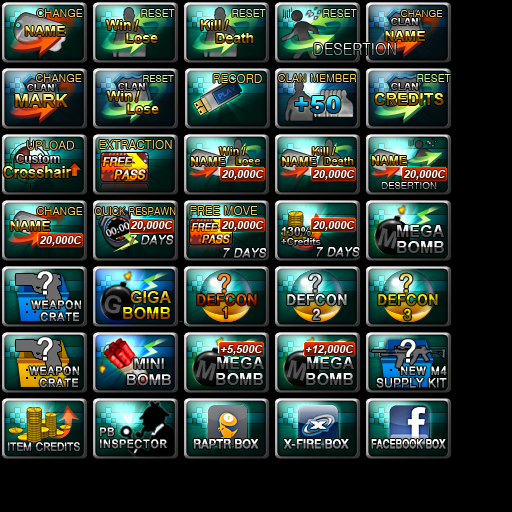
<style>
.page{position:relative;width:512px;height:512px;background:#000000}
.page>*{position:absolute;margin:0}
.t1{font:11px "Gulim";color:#ffcc66}
.t2{font:11px "Gulim";color:#ccff99}
.t3{font:10px "Gulim";color:#ffcc66}
.t4{font:14px "Arial-BoldMT"}
.t5{font:17.1px "Gulim";scale:0.88 1}
.t6{font:10px "Gulim";color:#ccff99}
.t7{font:12px "Gulim";color:#ffcc66}
.t8{font:18px "Arial-BoldMT"}
.t9{font:24px "Arial-Black"}
.t10{font:16px "Arial-BoldMT"}
.t11{font:12px "Gulim";color:#ffcc66;text-transform:uppercase}
.t12{font:11px/10px "Arial-BoldMT"}
.t13{font:12px "Arial-BoldMT"}
.t14{font:11.5px/13px "YDGothic540";font-weight:bold;font-style:italic}
.t15{font:10.5px/11.5px "YDGothic540";font-weight:bold;font-style:italic}
.t16{font:12px/13px "YDGothic540";font-weight:bold;font-style:italic}
.t17{font:17.2px "Arial-BoldMT";scale:0.85 1}
.t18{font:11px "Arial-BoldMT";color:#ffffff;font-style:italic}
.t19{font:10px "Gulim"}
.t20{font:11px "Gulim";color:#ffcc66;text-transform:uppercase;scale:0.9 1}
.t21{font:10.3px/11.7px "YDGothic540";font-weight:bold;font-style:italic}
.t22{font:9.5px/10.3px "YDGothic540";font-weight:bold;font-style:italic}
.t23{font:10.8px/11.7px "YDGothic540";font-weight:bold;font-style:italic}
.t24{font:16px/16px "Arial-BoldMT"}
.t25{font:12px "Gulim";font-weight:bold;font-style:italic}
.t26{font:10px "Arial-BoldMT"}
.t27{font:31.2px "ArialUnicodeMS";color:#ffffff;font-weight:bold}
.t28{font:25px "ArialUnicodeMS";color:#ff871c;font-weight:bold}
.t29{font:25px "ArialUnicodeMS";font-weight:bold}
.t30{font:15px "YDIYGO240";font-weight:bold;scale:0.91 1}
.t31{font:12px "YDIYGO240";font-weight:bold;scale:0.91 1}
.t32{font:24px "Arial-BoldMT";color:#505152}
.t33{font:15px/16px "Arial-BoldMT"}
.t34{font:12px "Dotum";font-weight:bold}
.t35{font:12px "YDIYGO240-KSCpc-EUC-H";letter-spacing:-0.15em;scale:0.9 1}
.t36{font:12px "HelveticaNeueLT-Medium";font-weight:bold;scale:0.91 1}
.t37{font:13.2px "HelveticaNeueLT-Medium";font-weight:bold;scale:0.68 1}
</style>
<div class="page">
<p class="t1" style="left:37px;top:9px;width:46px;height:8px">CHANGE</p>
<p class="t2" style="left:141px;top:9px;width:34px;height:8px">RESET</p>
<p class="t2" style="left:232px;top:9px;width:34px;height:8px">RESET</p>
<p class="t2" style="left:323px;top:9px;width:34px;height:8px">RESET</p>
<p class="t3" style="left:401px;top:10px;width:42px;height:7px">CHANGE</p>
<p class="t4" style="left:25px;top:26px;width:40px;height:10px">NAME</p>
<p class="t4" style="left:385px;top:31px;width:40px;height:10px">NAME</p>
<p class="t5" style="left:314px;top:43px;width:82px;height:12px">DESERTION</p>
<p class="t1" style="left:36px;top:74px;width:46px;height:8px">CHANGE</p>
<p class="t6" style="left:143px;top:75px;width:31px;height:7px">RESET</p>
<p class="t7" style="left:213px;top:74px;width:49px;height:9px">RECORD</p>
<p class="t1" style="left:278px;top:74px;width:79px;height:8px">CLAN MEMBER</p>
<p class="t2" style="left:417px;top:74px;width:34px;height:8px">RESET</p>
<p class="t8" style="left:15px;top:94px;width:53px;height:13px">MARK</p>
<p class="t9" style="left:295px;top:96px;width:46px;height:17px">+50</p>
<p class="t10" style="left:374px;top:93px;width:70px;height:12px">CREDITS</p>
<p class="t7" style="left:27px;top:140px;width:47px;height:10px">UPLOAD</p>
<p class="t11" style="left:99px;top:140px;width:73px;height:9px">Extraction</p>
<p class="t12" style="left:219px;top:147px;width:42px;height:18px;text-align:center">Win / <br>         Lose</p>
<p class="t12" style="left:312px;top:147px;width:42px;height:18px;text-align:center">Kill / <br>         Death</p>
<p class="t13" style="left:16px;top:154px;width:44px;height:9px">Custom</p>
<p class="t14" style="left:102px;top:157px;width:44px;height:23px"><span class="t15"> </span>FREE <br>    <span class="t16">PASS</span></p>
<p class="t13" style="left:190px;top:157px;width:36px;height:9px">NAME</p>
<p class="t13" style="left:281px;top:157px;width:36px;height:9px">NAME</p>
<p class="t13" style="left:371px;top:156px;width:36px;height:9px">NAME</p>
<p class="t17" style="left:3px;top:166px;width:69px;height:12px">Crosshair</p>
<p class="t18" style="left:221px;top:170px;width:43px;height:10px">20,000C</p>
<p class="t18" style="left:312px;top:170px;width:43px;height:10px">20,000C</p>
<p class="t18" style="left:403px;top:170px;width:43px;height:10px">20,000C</p>
<p class="t19" style="left:381px;top:182px;width:56px;height:7px">DESERTION</p>
<p class="t1" style="left:37px;top:207px;width:46px;height:8px">CHANGE</p>
<p class="t20" style="left:95px;top:207px;width:81px;height:8px">Quick Respawn</p>
<p class="t7" style="left:190px;top:206px;width:68px;height:9px">FREE MOVE</p>
<p class="t4" style="left:10px;top:221px;width:40px;height:10px">NAME</p>
<p class="t18" style="left:130px;top:221px;width:43px;height:10px">20,000C</p>
<p class="t21" style="left:191px;top:222px;width:39px;height:22px"><span class="t22"> </span>FREE <br>    <span class="t23">PASS</span></p>
<p class="t18" style="left:221px;top:221px;width:43px;height:10px">20,000C</p>
<p class="t18" style="left:312px;top:221px;width:43px;height:10px">20,000C</p>
<p class="t13" style="left:281px;top:227px;width:30px;height:9px">130%</p>
<p class="t24" style="left:397px;top:225px;width:47px;height:28px">MEGA<br>BOMB</p>
<p class="t18" style="left:39px;top:236px;width:43px;height:10px">20,000C</p>
<p class="t25" style="left:130px;top:235px;width:44px;height:10px">7 DAYS</p>
<p class="t26" style="left:281px;top:238px;width:40px;height:7px">+Credits</p>
<p class="t25" style="left:223px;top:248px;width:44px;height:10px">7 DAYS</p>
<p class="t25" style="left:316px;top:247px;width:44px;height:10px">7 DAYS</p>
<p class="t27" style="left:37px;top:271px;width:16px;height:24px">?</p>
<p class="t28" style="left:218px;top:273px;width:13px;height:20px">?</p>
<p class="t29" style="left:400px;top:273px;width:13px;height:20px">?</p>
<p class="t24" style="left:123px;top:291px;width:48px;height:28px;text-align:right">GIGA<br>BOMB</p>
<p class="t30" style="left:197px;top:293px;width:60px;height:13px">DEFCON</p>
<p class="t30" style="left:287px;top:293px;width:60px;height:13px">DEFCON</p>
<p class="t30" style="left:378px;top:293px;width:60px;height:13px">DEFCON</p>
<p class="t31" style="left:31px;top:300px;width:51px;height:10px">WEAPON</p>
<p class="t32" style="left:104px;top:295px;width:18px;height:19px;rotate:15deg">G</p>
<p class="t31" style="left:40px;top:312px;width:40px;height:10px">CRATE</p>
<p class="t30" style="left:222px;top:306px;width:6px;height:13px">1</p>
<p class="t30" style="left:312px;top:308px;width:8px;height:13px">2</p>
<p class="t30" style="left:403px;top:308px;width:9px;height:13px">3</p>
<p class="t27" style="left:37px;top:337px;width:16px;height:24px">?</p>
<p class="t27" style="left:400px;top:339px;width:16px;height:24px">?</p>
<p class="t18" style="left:221px;top:345px;width:42px;height:10px">+5,500C</p>
<p class="t18" style="left:306px;top:345px;width:48px;height:10px">+12,000C</p>
<p class="t31" style="left:29px;top:366px;width:51px;height:10px">WEAPON</p>
<p class="t33" style="left:127px;top:358px;width:44px;height:28px;text-align:center">MINI<br>BOMB</p>
<p class="t24" style="left:216px;top:357px;width:48px;height:28px;text-align:right">MEGA<br>BOMB</p>
<p class="t24" style="left:306px;top:357px;width:48px;height:28px;text-align:right">MEGA<br>BOMB</p>
<p class="t31" style="left:400px;top:366px;width:47px;height:10px">NEW M4</p>
<p class="t31" style="left:39px;top:378px;width:40px;height:10px">CRATE</p>
<p class="t34" style="left:376px;top:378px;width:71px;height:10px">SUPPLY KIT</p>
<p class="t31" style="left:99px;top:427px;width:16px;height:10px">PB</p>
<p class="t35" style="left:7px;top:442px;width:74px;height:10px">ITEM CREDITS</p>
<p class="t31" style="left:99px;top:439px;width:68px;height:10px">INSPECTOR</p>
<p class="t36" style="left:193px;top:439px;width:66px;height:10px">RAPTR BOX</p>
<p class="t36" style="left:284px;top:439px;width:65px;height:10px">X-FIRE BOX</p>
<p class="t37" style="left:371px;top:439px;width:75px;height:10px">FACEBOOK BOX</p>
</div>
